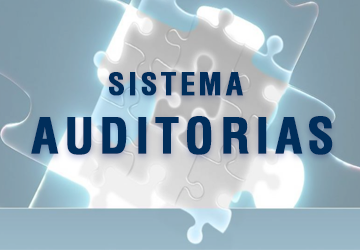
<style>
.page{position:relative;width:360px;height:250px}
.page>*{position:absolute;margin:0}
.t1{font:48px "Helvetica-Condensed-Bold";letter-spacing:0.1em;color:#002e5b;font-weight:bold}
.t2{font:30px "Helvetica-Condensed-Bold";letter-spacing:0.1em;color:#002e5b;font-weight:bold}
</style>
<div class="page">
<p class="t1" style="left:31px;top:72px;width:302px;height:83px;text-align:center"><span class="t2">SISTEMA</span> <br>AUDITORIAS</p>
</div>
